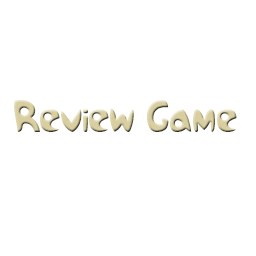
<style>
.page{position:relative;width:256px;height:256px;background:#ffffff}
.page>*{position:absolute;margin:0}
.t1{font:45.5px "Samba";letter-spacing:0.025em;color:#d8cea0}
</style>
<div class="page">
<p class="t1" style="left:14px;top:99px;width:223px;height:33px">Review Game</p>
</div>
